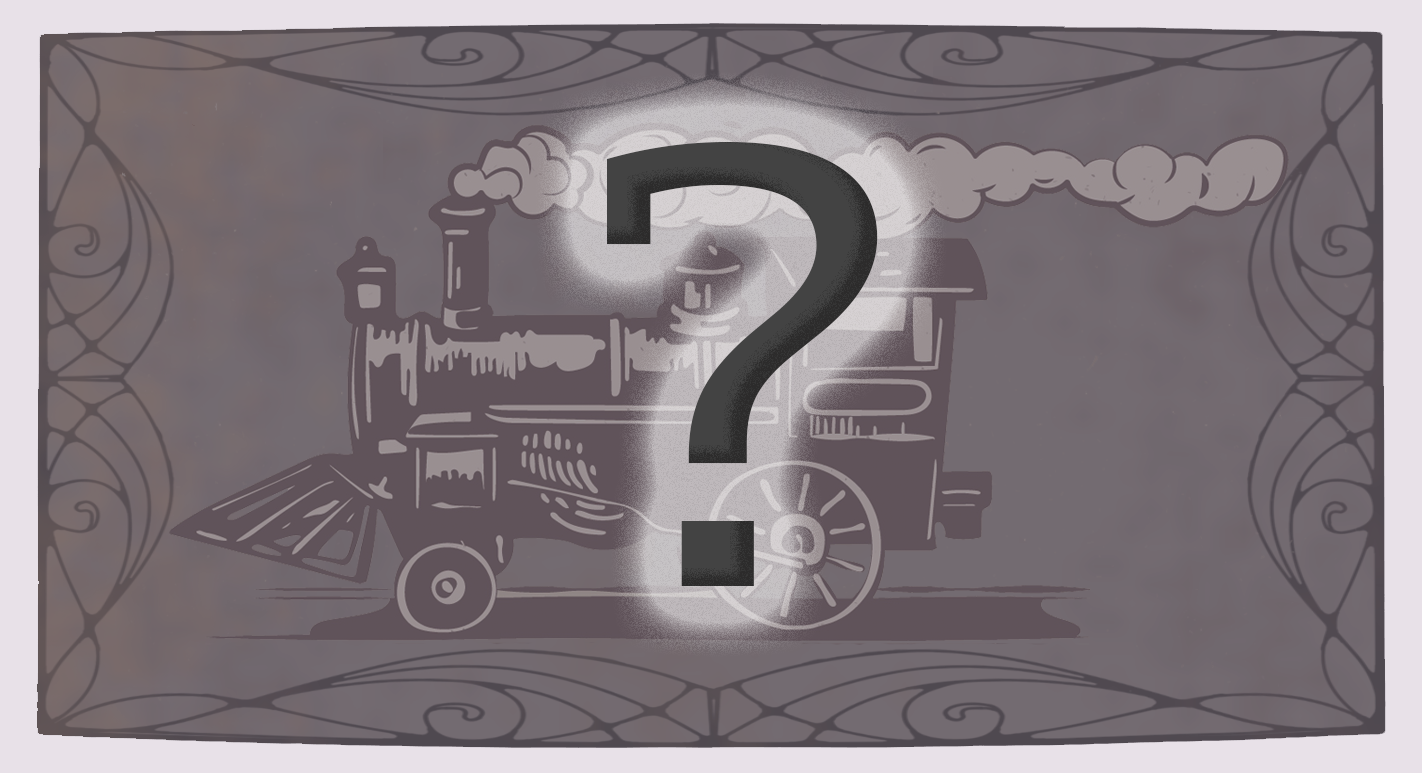
<style>
.page{position:relative;width:1422px;height:773px}
.page>*{position:absolute;margin:0}
.t1{font:600px "LucidaConsole";color:#434343}
</style>
<div class="page">
<p class="t1" style="left:607px;top:142px;width:271px;height:444px">?</p>
</div>
